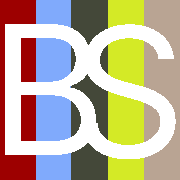
<style>
.page{position:relative;width:180px;height:180px;background:#ffffff}
.page>*{position:absolute;margin:0}
.t1{font:179.7px "InterV-Regular";color:#ffffff}
</style>
<div class="page">
<p class="t1" style="left:5px;top:24px;width:91px;height:131px">B</p>
<p class="t1" style="left:81px;top:24px;width:95px;height:135px">S</p>
</div>
